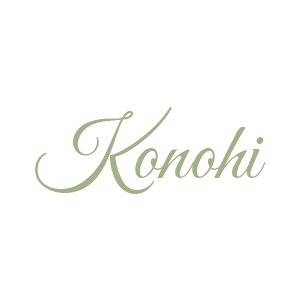
<style>
.page{position:relative;width:300px;height:300px;background:#ffffff}
.page>*{position:absolute;margin:0}
.t1{font:83.3px "GreatVibes-Regular";color:#a3b18a}
</style>
<div class="page">
<p class="t1" style="left:35px;top:107px;width:231px;height:87px">Konohi</p>
</div>
